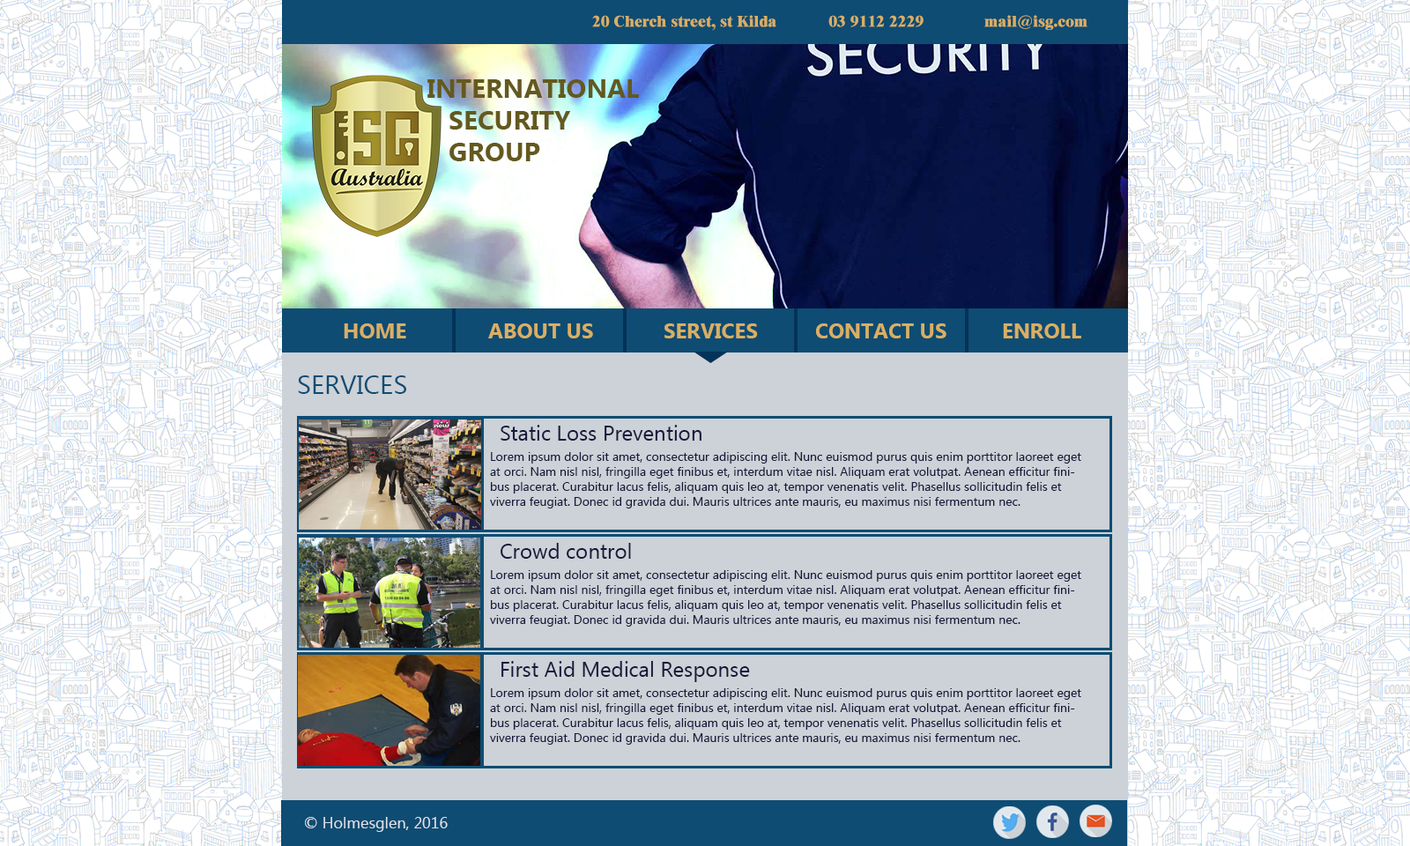
<style>
.page{position:relative;width:1410px;height:846px}
.page>*{position:absolute;margin:0}
.t1{font:15.9px "Dutch801BT-ExtraBold";color:#d9af62}
.t2{font:26.4px "Ebrima-Bold";color:#64591e}
.t3{font:26.4px "Ebrima-Bold";color:#ffffff}
.t4{font:21.1px "Ebrima-Bold";color:#d9af62}
.t5{font:26.4px "Ebrima";color:#0e4c73}
.t6{font:21.1px "Ebrima";color:#161a3c}
.t7{font:12.3px "Ebrima";color:#161a3c}
.t8{font:15.9px "Ebrima";color:#dfe0e7}
</style>
<div class="page">
<p class="t1" style="left:592px;top:15px;width:495px;height:16px">20 Cherch street, st Kilda            03 9112 2229              mail@isg.com</p>
<p class="t2" style="left:427px;top:79px;width:212px;height:82px">INTERNATIONAL<br>   SECURITY<br>   GROUP<span class="t3">P</span></p>
<p class="t4" style="left:344px;top:323px;width:62px;height:15px">HOME</p>
<p class="t4" style="left:488px;top:323px;width:105px;height:15px">ABOUT US</p>
<p class="t4" style="left:664px;top:323px;width:94px;height:15px">SERVICES</p>
<p class="t4" style="left:816px;top:323px;width:130px;height:15px">CONTACT US</p>
<p class="t4" style="left:1003px;top:323px;width:78px;height:15px">ENROLL</p>
<p class="t5" style="left:298px;top:375px;width:108px;height:19px">SERVICES</p>
<p class="t6" style="left:500px;top:425px;width:201px;height:16px">Static Loss Prevention</p>
<p class="t7" style="left:490px;top:452px;width:591px;height:56px">Lorem ipsum dolor sit amet, consectetur adipiscing elit. Nunc euismod purus quis enim porttitor laoreet eget at orci. Nam nisl nisl, fringilla eget finibus et, interdum vitae nisl. Aliquam erat volutpat. Aenean efficitur finibus placerat. Curabitur lacus felis, aliquam quis leo at, tempor venenatis velit. Phasellus sollicitudin felis et viverra feugiat. Donec id gravida dui. Mauris ultrices ante mauris, eu maximus nisi fermentum nec.</p>
<p class="t6" style="left:500px;top:543px;width:131px;height:16px">Crowd control</p>
<p class="t7" style="left:490px;top:570px;width:591px;height:56px">Lorem ipsum dolor sit amet, consectetur adipiscing elit. Nunc euismod purus quis enim porttitor laoreet eget at orci. Nam nisl nisl, fringilla eget finibus et, interdum vitae nisl. Aliquam erat volutpat. Aenean efficitur finibus placerat. Curabitur lacus felis, aliquam quis leo at, tempor venenatis velit. Phasellus sollicitudin felis et viverra feugiat. Donec id gravida dui. Mauris ultrices ante mauris, eu maximus nisi fermentum nec.</p>
<p class="t6" style="left:501px;top:661px;width:249px;height:21px">First Aid Medical Response</p>
<p class="t7" style="left:490px;top:688px;width:591px;height:57px">Lorem ipsum dolor sit amet, consectetur adipiscing elit. Nunc euismod purus quis enim porttitor laoreet eget at orci. Nam nisl nisl, fringilla eget finibus et, interdum vitae nisl. Aliquam erat volutpat. Aenean efficitur finibus placerat. Curabitur lacus felis, aliquam quis leo at, tempor venenatis velit. Phasellus sollicitudin felis et viverra feugiat. Donec id gravida dui. Mauris ultrices ante mauris, eu maximus nisi fermentum nec.</p>
<p class="t8" style="left:305px;top:817px;width:143px;height:15px">© Holmesglen, 2016</p>
</div>
